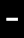
<style>
.page{position:relative;width:24px;height:38px;background:#000000}
.page>*{position:absolute;margin:0}
.t1{font:25px "Audiowide-Regular";letter-spacing:0.035em;color:#ffffff}
</style>
<div class="page">
<p class="t1" style="left:6px;top:17px;width:12px;height:4px">-</p>
</div>
